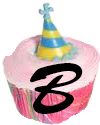
<style>
.page{position:relative;width:100px;height:125px;background:#ffffff}
.page>*{position:absolute;margin:0}
.t1{font:72px "BrushScriptStd";color:#000000}
</style>
<div class="page">
<p class="t1" style="left:30px;top:63px;width:53px;height:51px">B</p>
</div>
